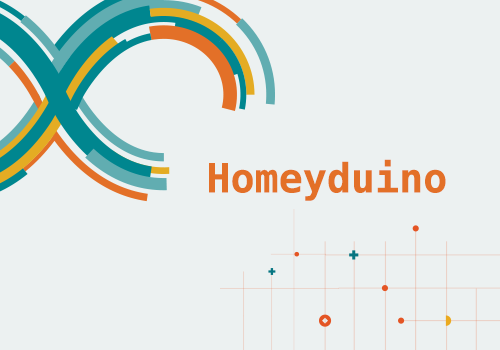
<style>
.page{position:relative;width:500px;height:350px;background:#ecf1f1}
.page>*{position:absolute;margin:0}
.t1{font:40px "BitstreamVeraSansMono-Bold";color:#e37028}
</style>
<div class="page">
<p class="t1" style="left:209px;top:159px;width:237px;height:42px">Homeyduino</p>
</div>
